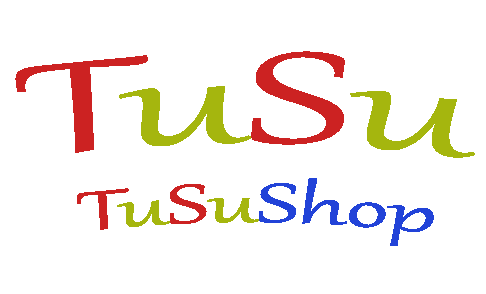
<style>
.page{position:relative;width:486px;height:294px;background:#ffffff}
.page>*{position:absolute;margin:0}
.t1{font:66.7px "Gabriola";color:#2243d8}
.t2{font:150px "Gabriola";color:#cc2222}
.t3{font:158.3px "Gabriola";color:#cc2222}
.t4{font:158.3px "Gabriola";color:#a5b60e}
.t5{font:66.7px "Gabriola";color:#cc2222}
.t6{font:66.7px "Gabriola";color:#a5b60e}
</style>
<div class="page">
<p class="t1" style="left:15px;top:51px;width:460px;height:195px;text-align:center"><span class="t2"><br></span><span class="t3">T</span><span class="t4">u</span><span class="t3">S</span><span class="t4">u<br></span><span class="t5"> T</span><span class="t6">u</span><span class="t5">S</span><span class="t6">u</span>Shop</p>
</div>
